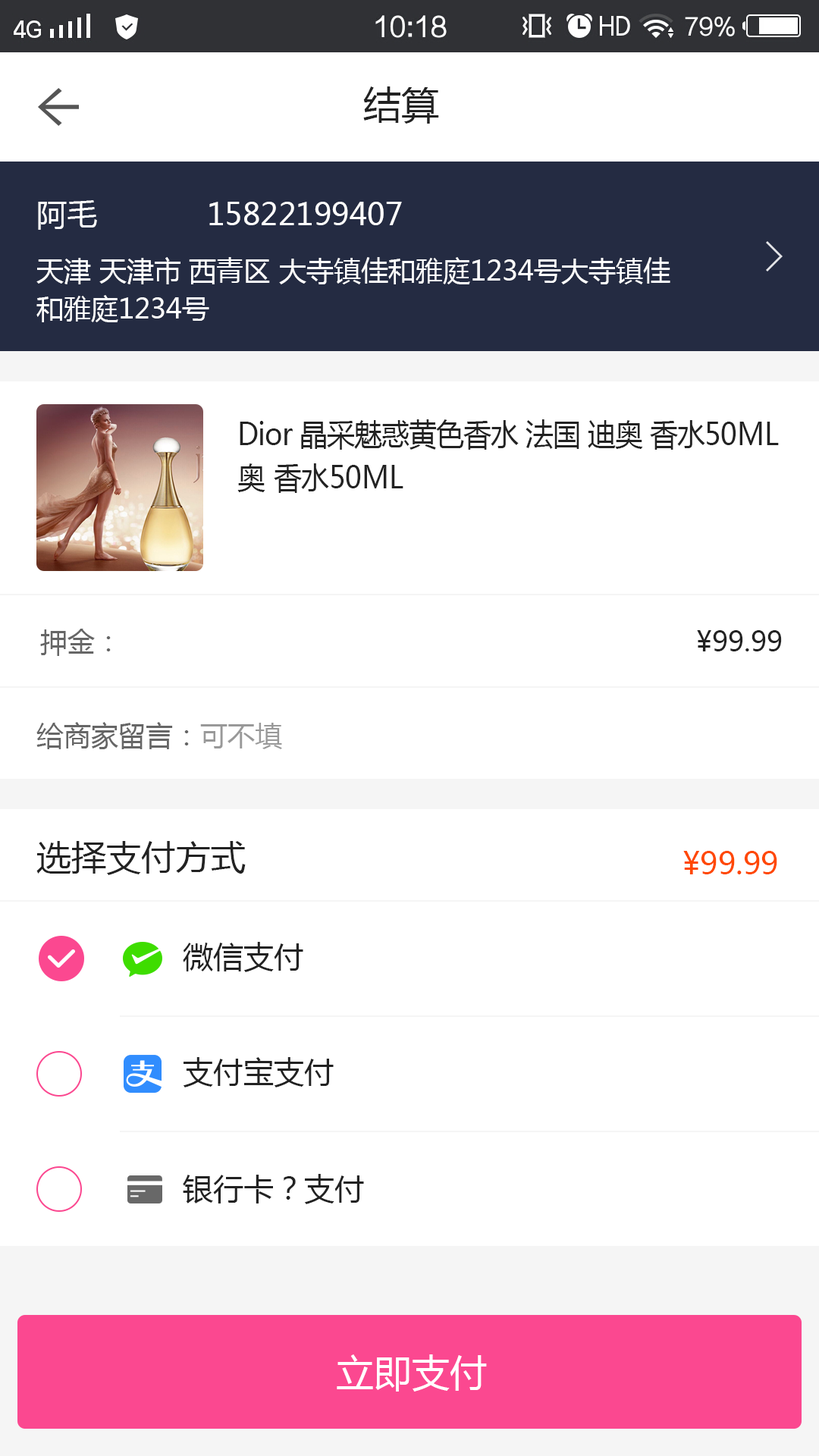
<style>
.page{position:relative;width:819px;height:1456px;background:#ffffff}
.page>*{position:absolute;margin:0}
.t1{font:37.9px "MicrosoftYaHei";color:#222222}
.t2{font:30.3px "MicrosoftYaHei";color:#ffffff}
.t3{font:27.3px/38.1px "MicrosoftYaHei";color:#ffffff}
.t4{font:30.3px/43.4px "MicrosoftYaHei";letter-spacing:-0.02em;color:#222222;scale:0.92 1}
.t5{font:30.3px/43.4px "MicrosoftYaHei";color:#222222;scale:0.92 1}
.t6{font:27.3px "MicrosoftYaHei";color:#222222}
.t7{font:27.3px "MicrosoftYaHei";color:#666666}
.t8{font:27.3px "MicrosoftYaHei";color:#999999}
.t9{font:34.9px "MicrosoftYaHei";color:#222222}
.t10{font:30.3px "MicrosoftYaHei";color:#ff4800}
.t11{font:30.3px "MicrosoftYaHei";color:#222222}
.t12{font:37.9px "MicrosoftYaHei";color:#ffffff}
</style>
<div class="page">
<p class="t1" style="left:363px;top:86px;width:76px;height:38px">结算</p>
<p class="t2" style="left:38px;top:200px;width:59px;height:30px">阿毛</p>
<p class="t2" style="left:209px;top:202px;width:193px;height:23px">15822199407</p>
<p class="t3" style="left:36px;top:257px;width:634px;height:65px">天津 天津市 西青区 大寺镇佳和雅庭1234号大寺镇佳和雅庭1234号</p>
<p class="t4" style="left:237px;top:419px;width:542px;height:74px">Dior 晶采魅惑黄色香水 法国 迪奥 香水<span class="t5">50ML  奥 香水50ML</span></p>
<p class="t6" style="left:40px;top:629px;width:742px;height:27px"><span class="t7">押金：                                              </span>                         ¥99.99</p>
<p class="t7" style="left:36px;top:722px;width:246px;height:27px">给商家留言：<span class="t8">可不填</span></p>
<p class="t9" style="left:36px;top:841px;width:210px;height:34px">选择支付方式</p>
<p class="t10" style="left:683px;top:851px;width:94px;height:23px">¥99.99</p>
<p class="t11" style="left:183px;top:942px;width:120px;height:30px">微信支付</p>
<p class="t11" style="left:183px;top:1057px;width:151px;height:30px">支付宝支付</p>
<p class="t11" style="left:183px;top:1174px;width:181px;height:30px">银行卡？支付</p>
<p class="t12" style="left:337px;top:1354px;width:150px;height:38px">立即支付</p>
</div>
